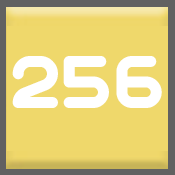
<style>
.page{position:relative;width:175px;height:175px;background:#efd86b}
.page>*{position:absolute;margin:0}
.t1{font:69.4px "Aqum";color:#ffffff}
</style>
<div class="page">
<p class="t1" style="left:12px;top:56px;width:150px;height:52px">256</p>
</div>
